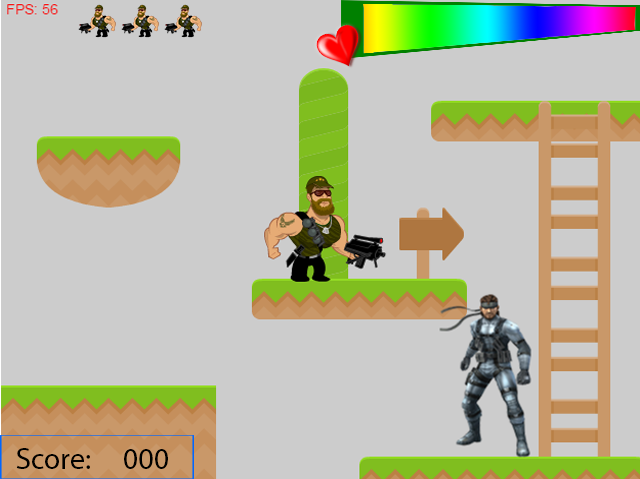
<style>
.page{position:relative;width:640px;height:479px;background:#cccccc}
.page>*{position:absolute;margin:0}
.t1{font:30px "MyriadPro-Regular";color:#000000}
</style>
<div class="page">
<p class="t1" style="left:16px;top:448px;width:152px;height:21px">Score:     000</p>
</div>
